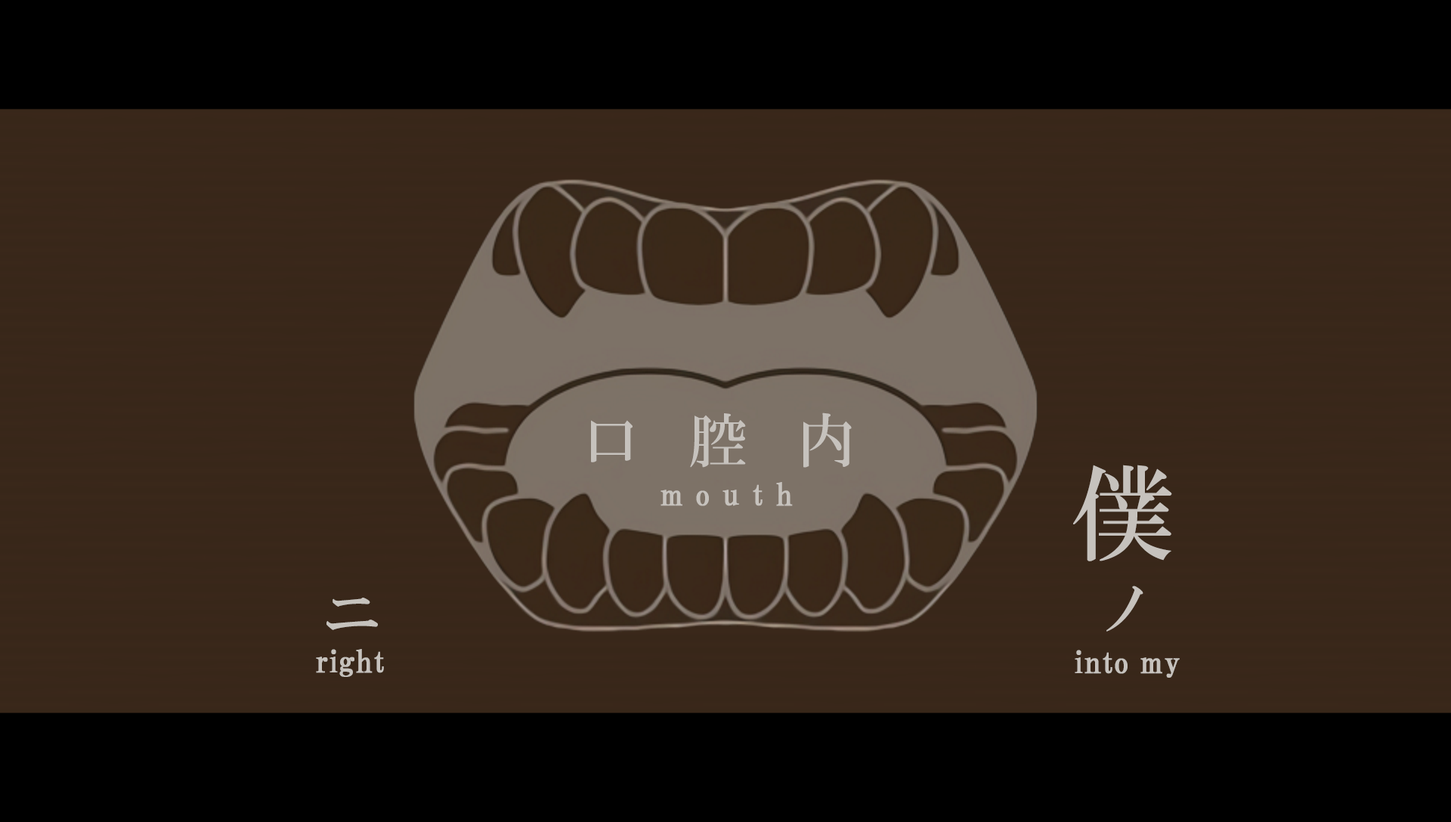
<style>
.page{position:relative;width:1451px;height:822px;background:#000000}
.page>*{position:absolute;margin:0}
.t1{font:58.2px "HGMinchoB";letter-spacing:0.85em;color:#c6c2bd}
.t2{font:105.8px "HGMinchoB";letter-spacing:0.85em;color:#c6c2bd}
.t3{font:30.2px "HGPMinchoB";letter-spacing:0.4em;color:#c6c2bd;font-weight:bold}
.t4{font:30.2px "HGPMinchoB";letter-spacing:0.01em;color:#c6c2bd;font-weight:bold}
</style>
<div class="page">
<p class="t1" style="left:591px;top:413px;width:260px;height:55px">口腔内</p>
<p class="t2" style="left:1073px;top:465px;width:99px;height:96px">僕</p>
<p class="t3" style="left:660px;top:482px;width:133px;height:24px">mouth</p>
<p class="t1" style="left:1106px;top:586px;width:37px;height:46px">ノ</p>
<p class="t1" style="left:326px;top:598px;width:52px;height:32px">ニ</p>
<p class="t4" style="left:316px;top:649px;width:68px;height:28px">right</p>
<p class="t4" style="left:1074px;top:650px;width:105px;height:28px">into my</p>
</div>
